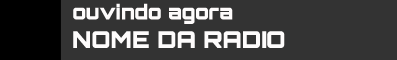
<style>
.page{position:relative;width:397px;height:60px;background:#333333}
.page>*{position:absolute;margin:0}
.t1{font:19.9px "Orbitron-Black";color:#fefcfc}
.t2{font:23px "Orbitron-Black";color:#fefcfc}
</style>
<div class="page">
<p class="t1" style="left:73px;top:3px;width:160px;height:21px">ouvindo agora</p>
<p class="t2" style="left:73px;top:31px;width:212px;height:17px">NOME DA RADIO</p>
</div>
